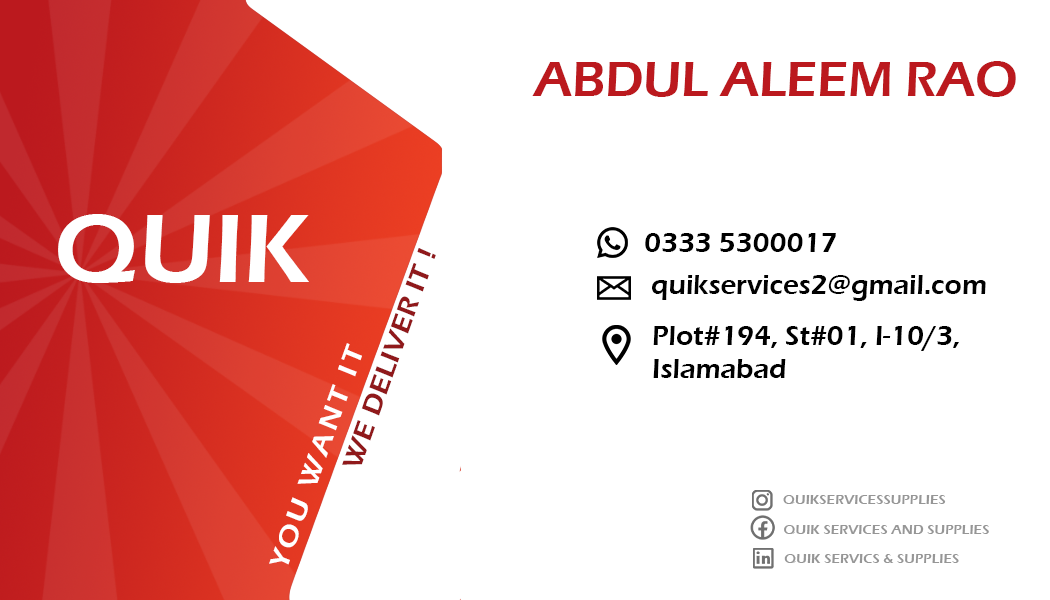
<style>
.page{position:relative;width:1050px;height:600px;background:#ffffff}
.page>*{position:absolute;margin:0}
.t1{font:50.5px "ErasITC-Demi";color:#bb191e}
.t2{font:99.8px "ErasITC-Demi";color:#ffffff}
.t3{font:27.8px "ErasITC-Demi";color:#000000}
.t4{font:27.8px "ErasITC-Demi";letter-spacing:0.02em;color:#90191b;scale:1.04 1}
.t5{font:27.8px "ErasITC-Demi";color:#010101}
.t6{font:27.8px "ErasITC-Demi";letter-spacing:0.1em;color:#ffffff;scale:1.09 1}
.t7{font:14.2px "ErasITC-Demi";color:#969696}
</style>
<div class="page">
<p class="t1" style="left:532px;top:61px;width:484px;height:36px">ABDUL ALEEM RAO</p>
<p class="t2" style="left:58px;top:214px;width:251px;height:69px">QUIK</p>
<p class="t3" style="left:645px;top:233px;width:191px;height:19px">0333 5300017</p>
<p class="t4" style="left:342px;top:248px;width:94px;height:217px;rotate:-71deg">WE DELIVER IT !</p>
<p class="t5" style="left:652px;top:275px;width:334px;height:26px">quikservices2@gmail.com</p>
<p class="t3" style="left:653px;top:326px;width:306px;height:52px">Plot#194, St#01, I-10/3,<br>Islamabad</p>
<p class="t6" style="left:269px;top:343px;width:93px;height:222px;rotate:-71deg">YOU WANT IT</p>
<p class="t7" style="left:783px;top:495px;width:163px;height:9px">QUIKSERVICESSUPPLIES</p>
<p class="t7" style="left:784px;top:525px;width:205px;height:9px">QUIK SERVICES AND SUPPLIES</p>
<p class="t7" style="left:784px;top:554px;width:175px;height:9px">QUIK SERVICS &amp; SUPPLIES</p>
</div>
